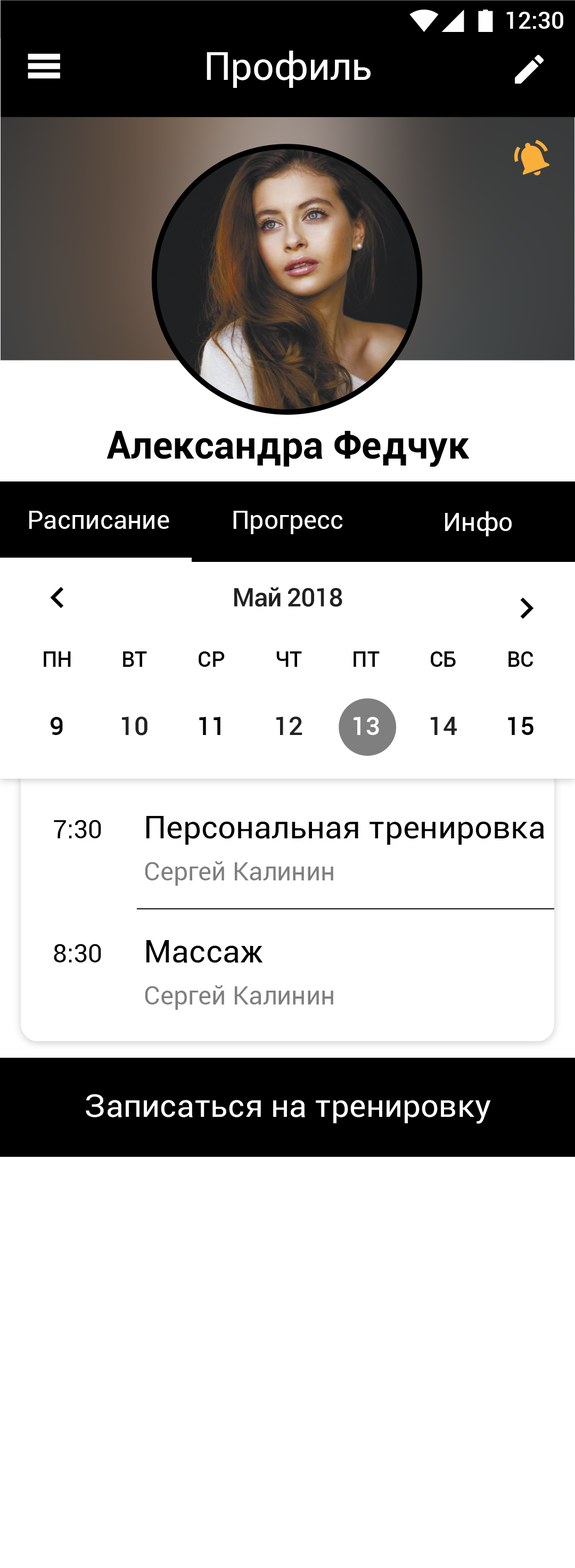
<style>
.page{position:relative;width:575px;height:1568px;background:#ffffff}
.page>*{position:absolute;margin:0}
.t1{font:23.4px "Roboto-Medium";color:#ffffff}
.t2{font:38.3px "Roboto-Regular";color:#ffffff}
.t3{font:38.3px "Roboto-Bold";color:#000000}
.t4{font:25.6px "Roboto-Regular";color:#ffffff}
.t5{font:21.2px "Roboto-Medium";color:#000000}
.t6{font:25.6px "Roboto-Medium";color:#000000}
.t7{font:25.6px "Roboto-Medium";color:#ffffff}
.t8{font:25.6px "Roboto-Regular";color:#000000}
.t9{font:32px "Roboto-Regular";color:#000000}
.t10{font:25.6px "Roboto-Regular";color:#7f7f7f}
.t11{font:31.9px "Roboto-Regular";color:#ffffff}
</style>
<div class="page">
<p class="t1" style="left:507px;top:12px;width:57px;height:17px">12:30</p>
<p class="t2" style="left:207px;top:51px;width:164px;height:37px">Профиль</p>
<p class="t3" style="left:107px;top:431px;width:363px;height:36px">Александра Федчук</p>
<p class="t4" style="left:29px;top:511px;width:140px;height:18px">Расписание</p>
<p class="t4" style="left:233px;top:511px;width:109px;height:23px">Прогресс</p>
<p class="t4" style="left:445px;top:511px;width:67px;height:25px">Инфо</p>
<p class="t5" style="left:44px;top:651px;width:27px;height:16px">ПН</p>
<p class="t5" style="left:123px;top:651px;width:24px;height:16px">ВТ</p>
<p class="t5" style="left:199px;top:651px;width:26px;height:16px">СР</p>
<p class="t5" style="left:276px;top:651px;width:26px;height:16px">ЧТ</p>
<p class="t5" style="left:354px;top:651px;width:26px;height:16px">ПТ</p>
<p class="t5" style="left:431px;top:651px;width:25px;height:16px">СБ</p>
<p class="t5" style="left:509px;top:651px;width:24px;height:16px">ВС</p>
<p class="t6" style="left:50px;top:717px;width:13px;height:18px">9</p>
<p class="t6" style="left:199px;top:717px;width:21px;height:18px">11</p>
<p class="t7" style="left:354px;top:717px;width:25px;height:18px">13</p>
<p class="t6" style="left:508px;top:717px;width:26px;height:18px">15</p>
<p class="t8" style="left:54px;top:820px;width:47px;height:18px">7:30</p>
<p class="t9" style="left:146px;top:816px;width:398px;height:29px">Персональная тренировка</p>
<p class="t10" style="left:145px;top:861px;width:188px;height:25px">Сергей Калинин</p>
<p class="t9" style="left:146px;top:940px;width:117px;height:23px">Массаж</p>
<p class="t8" style="left:54px;top:944px;width:47px;height:18px">8:30</p>
<p class="t10" style="left:145px;top:985px;width:188px;height:25px">Сергей Калинин</p>
<p class="t11" style="left:86px;top:1094px;width:405px;height:30px">Записаться на тренировку</p>
</div>
